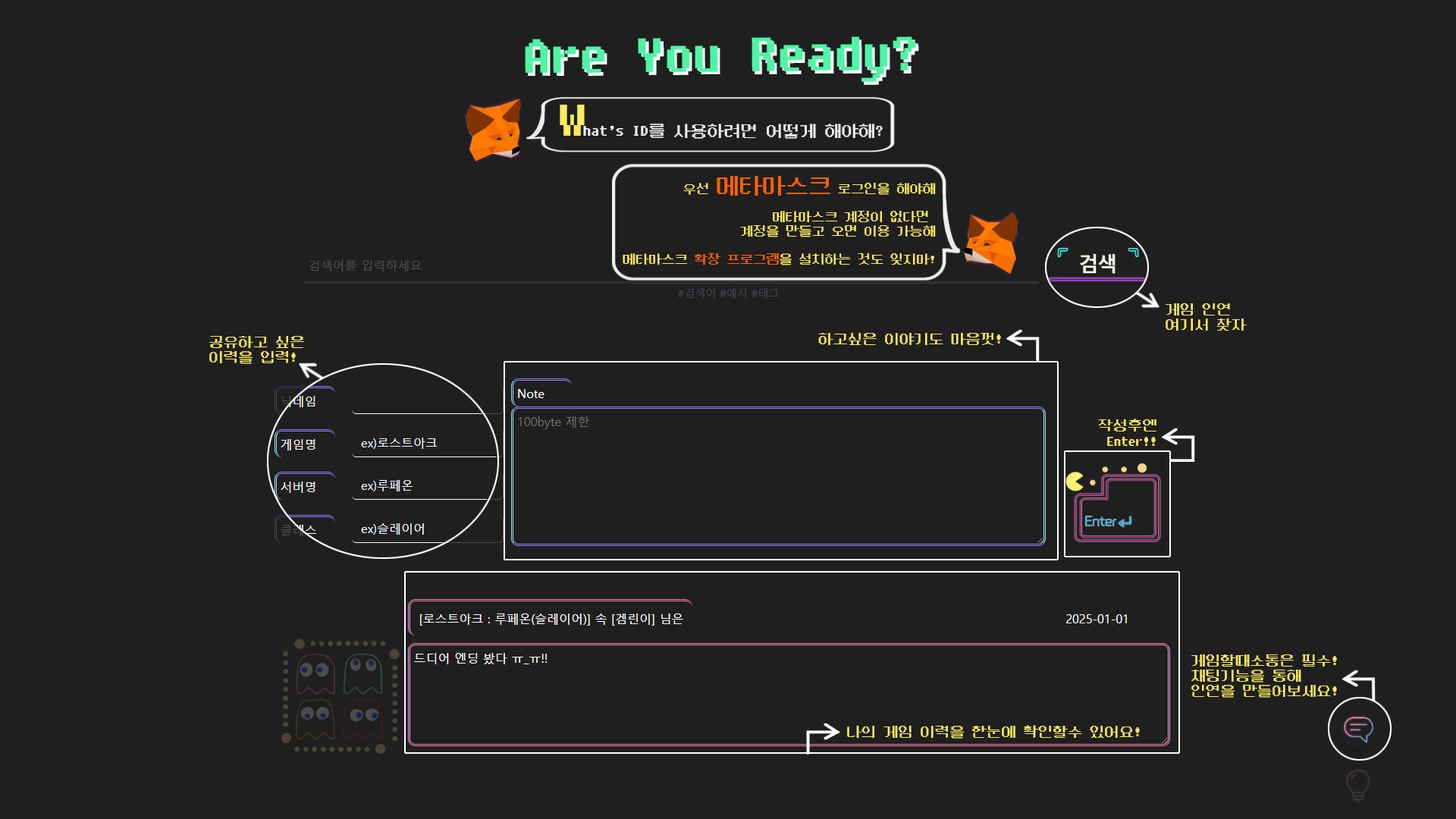
<style>
.page{position:relative;width:1456px;height:819px;background:#1f1f1f}
.page>*{position:absolute;margin:0}
.t1{font:59.6px "DungGeunMo";letter-spacing:-0.025em;color:#4cf6a4}
.t2{font:59.6px "DungGeunMo";letter-spacing:-0.025em}
.t3{font:17.3px "DungGeunMo";letter-spacing:-0.025em;color:#f1f1f1}
.t4{font:55.1px "DungGeunMo";letter-spacing:-0.025em;color:#feec5d}
.t5{font:13.8px/14px "DungGeunMo";letter-spacing:-0.025em;color:#feec5d}
.t6{font:24.3px/14px "DungGeunMo";letter-spacing:-0.025em;color:#ff6100}
.t7{font:13.8px/14px "DungGeunMo";letter-spacing:-0.025em;color:#ff6100}
.t8{font:15.2px/15.4px "DungGeunMo";letter-spacing:-0.025em;color:#feec5d}
.t9{font:15.2px "DungGeunMo";letter-spacing:-0.025em;color:#feec5d}
.t10{font:15.2px/15.9px "DungGeunMo";letter-spacing:-0.025em;color:#feec5d}
</style>
<div class="page">
<p class="t1" style="left:525px;top:36px;width:391px;height:46px">Are You Ready?</p>
<p class="t2" style="left:527px;top:39px;width:392px;height:46px">Are You Ready?</p>
<p class="t3" style="left:560px;top:105px;width:323px;height:34px"><span class="t4">W</span>hat’s ID를 사용하려면 어떻게 해야해?</p>
<p class="t5" style="left:623px;top:176px;width:313px;height:89px;text-align:right">우선 <span class="t6">메타마스크</span> 로그인을 해야해<br><br>메타마스크 계정이 없다면 <br>계정을 만들고 오면 이용 가능해<br><br>메타마스크 <span class="t7">확장 프로그램</span>을 설치하는 것도 잊지마!</p>
<p class="t8" style="left:1166px;top:303px;width:81px;height:28px">게임 인연 <br>여기서 찾자</p>
<p class="t8" style="left:209px;top:336px;width:95px;height:28px">공유하고 싶은 <br>이력을 입력!</p>
<p class="t9" style="left:818px;top:333px;width:183px;height:12px">하고싶은 이야기도 마음껏!</p>
<p class="t10" style="left:1098px;top:419px;width:58px;height:27px;text-align:right">작성후엔<br> Enter!!</p>
<p class="t8" style="left:1191px;top:654px;width:146px;height:44px">게임할때소통은 필수! <br>채팅기능을 통해 <br>인연을 만들어보세요!</p>
<p class="t9" style="left:847px;top:725px;width:293px;height:14px">나의 게임 이력을 한눈에 확인할수 있어요!</p>
</div>
